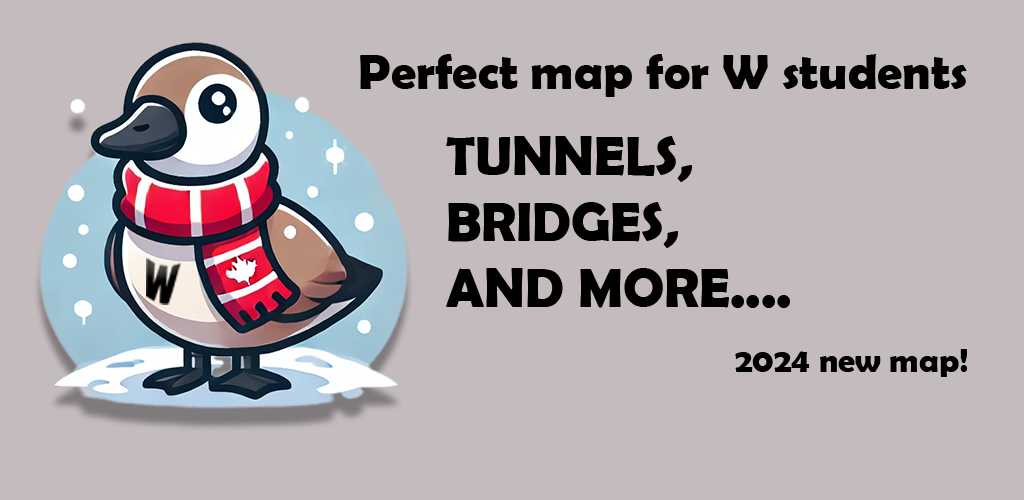
<style>
.page{position:relative;width:1024px;height:500px;background:#c3bbbe}
.page>*{position:absolute;margin:0}
.t1{font:50.2px "BerlinSansFBDemi-Bold";color:#000000}
.t2{font:54.9px "BerlinSansFBDemi-Bold";color:#000000}
.t3{font:34px "BerlinSansFBDemi-Bold";color:#000000}
</style>
<div class="page">
<p class="t1" style="left:360px;top:54px;width:607px;height:43px">Perfect map for W students</p>
<p class="t2" style="left:446px;top:136px;width:344px;height:172px">TUNNELS,<br>BRIDGES,<br>AND MORE....</p>
<p class="t3" style="left:735px;top:349px;width:232px;height:28px">2024 new map!</p>
</div>
